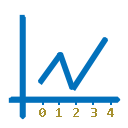
<style>
.page{position:relative;width:128px;height:128px;background:#ffffff}
.page>*{position:absolute;margin:0}
.t1{font:14px "Consolas-Bold";color:#a6912f}
</style>
<div class="page">
<p class="t1" style="left:39px;top:108px;width:7px;height:9px">0</p>
<p class="t1" style="left:56px;top:108px;width:6px;height:9px">1</p>
<p class="t1" style="left:73px;top:108px;width:6px;height:9px">2</p>
<p class="t1" style="left:91px;top:108px;width:6px;height:9px">3</p>
<p class="t1" style="left:107px;top:108px;width:7px;height:9px">4</p>
</div>
